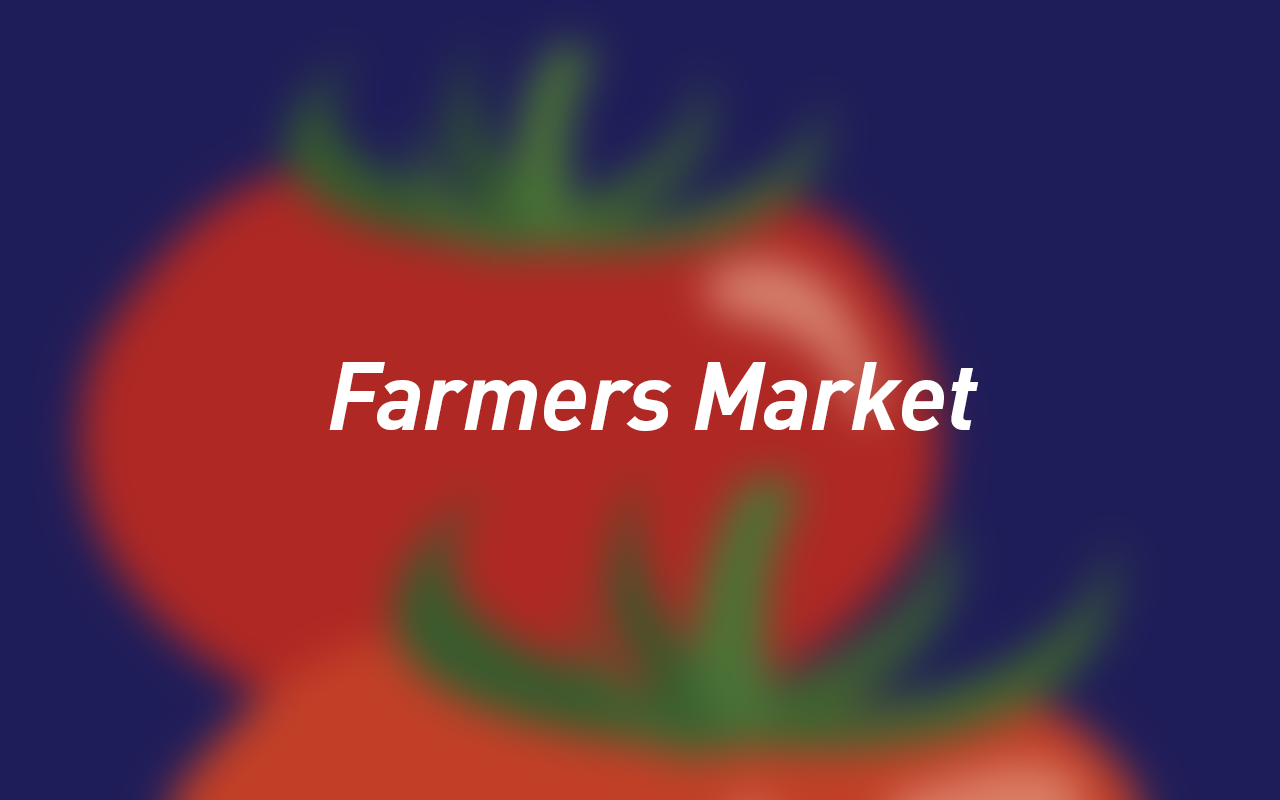
<style>
.page{position:relative;width:1280px;height:800px;background:#1f1d59}
.page>*{position:absolute;margin:0}
.t1{font:94.2px "DIN-BoldItalic";letter-spacing:-0.01em;color:#ffffff}
</style>
<div class="page">
<p class="t1" style="left:329px;top:362px;width:649px;height:69px">Farmers Market</p>
</div>
